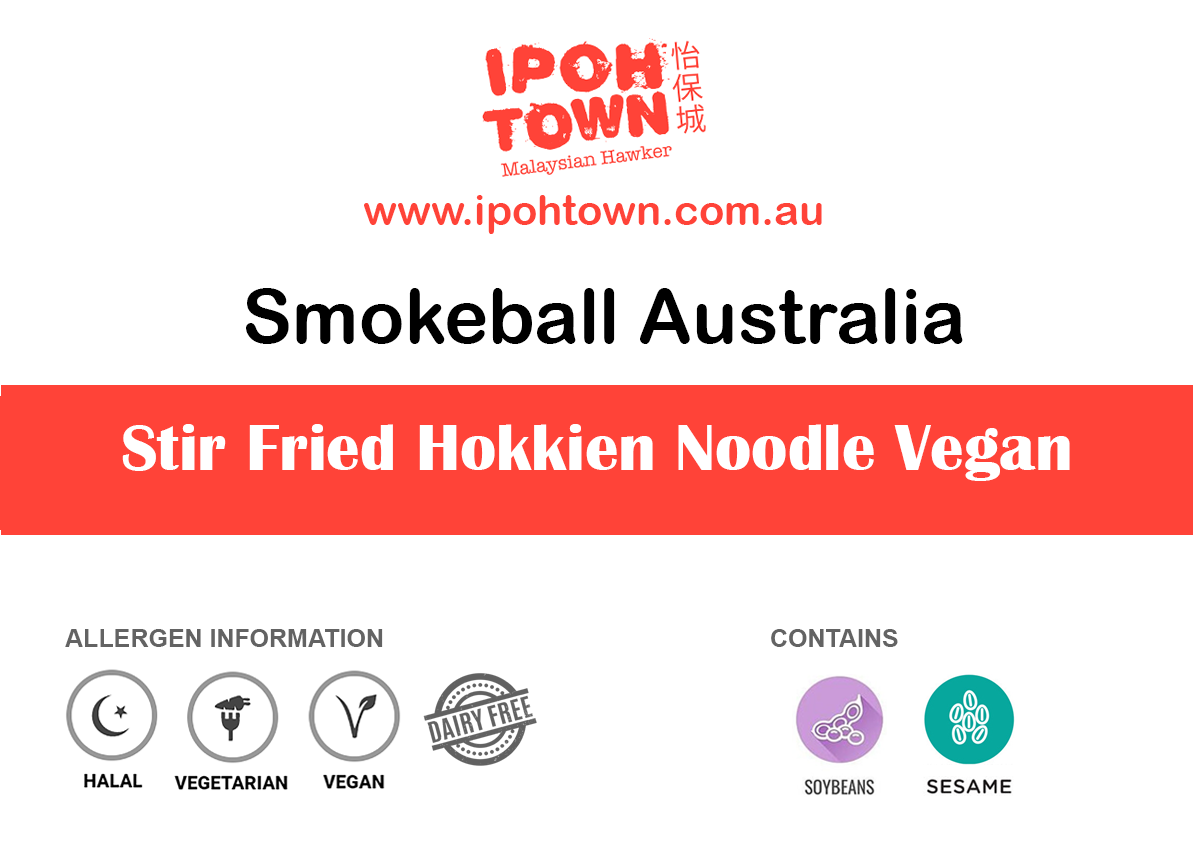
<style>
.page{position:relative;width:1193px;height:850px;background:#ffffff}
.page>*{position:absolute;margin:0}
.t1{font:41.7px "ArialRoundedMTBold";color:#ff4338}
.t2{font:75px "ArialRoundedMTBold";color:#000000}
.t3{font:66.7px "BritannicBold";color:#ffffff}
.t4{font:25px "Arial-BoldMT";color:#636363}
</style>
<div class="page">
<p class="t1" style="left:364px;top:195px;width:458px;height:39px">www.ipohtown.com.au</p>
<p class="t2" style="left:246px;top:288px;width:717px;height:56px">Smokeball Australia</p>
<p class="t3" style="left:122px;top:424px;width:948px;height:57px">Stir Fried Hokkien Noodle Vegan</p>
<p class="t4" style="left:65px;top:629px;width:318px;height:18px">ALLERGEN INFORMATION</p>
<p class="t4" style="left:771px;top:629px;width:127px;height:18px">CONTAINS</p>
</div>
